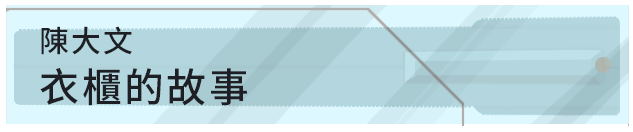
<style>
.page{position:relative;width:633px;height:132px;background:#b4d7df}
.page>*{position:absolute;margin:0}
.t1{font:40px/49.8px "NotoSansCJKtc-Medium";letter-spacing:0.06em;color:#1e1f24}
.t2{font:30px/49.8px "NotoSansCJKtc-Medium";letter-spacing:0.06em;color:#1e1f24}
</style>
<div class="page">
<p class="t1" style="left:40px;top:26px;width:208px;height:80px"><span class="t2">陳大文<br></span>衣櫃的故事</p>
</div>
